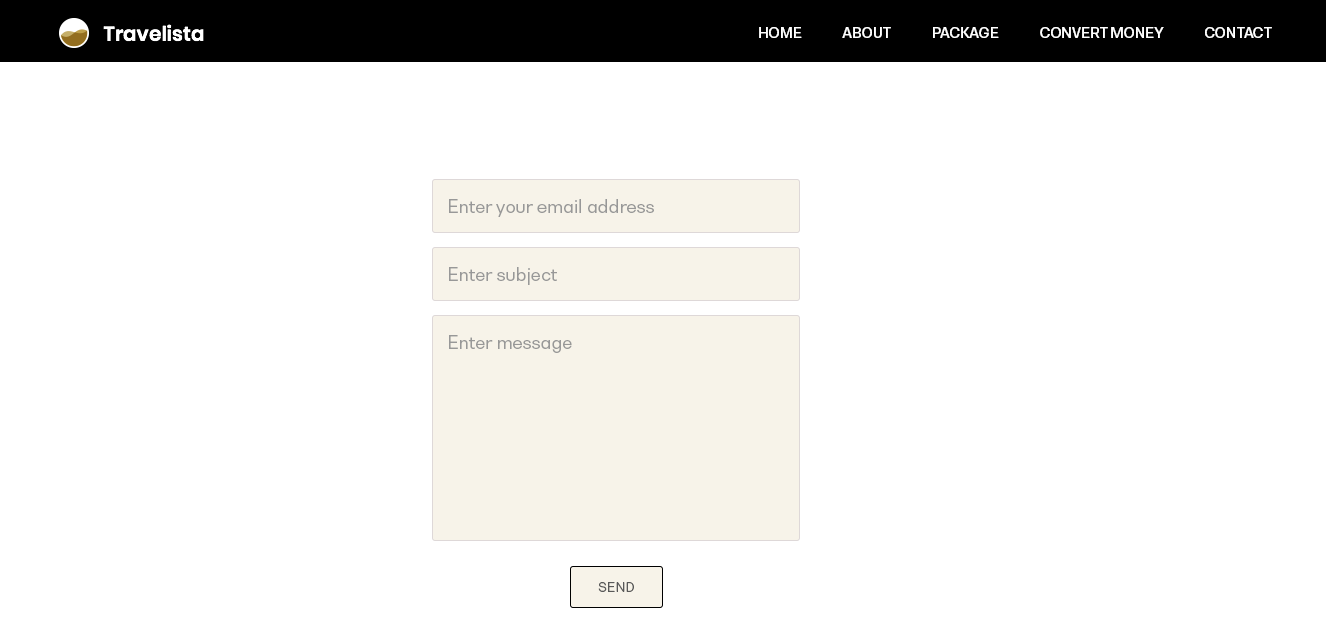
<style>
.page{position:relative;width:1326px;height:638px;background:#ffffff}
.page>*{position:absolute;margin:0}
.t1{font:13.3px "BwNistaGeometricDEMO-Bold";color:#ffffff}
.t2{font:17.1px "BwNistaGeometricDEMO-Regular";color:#989898}
.t3{font:12.9px "BwNistaGeometricDEMO-Regular";color:#595959}
</style>
<div class="page">
<p class="t1" style="left:759px;top:27px;width:513px;height:11px">HOME             ABOUT             PACKAGE             CONVERT MONEY             CONTACT</p>
<p class="t2" style="left:449px;top:199px;width:205px;height:18px">Enter your email address</p>
<p class="t2" style="left:449px;top:267px;width:108px;height:18px">Enter subject</p>
<p class="t2" style="left:449px;top:335px;width:123px;height:18px">Enter message</p>
<p class="t3" style="left:598px;top:582px;width:36px;height:10px">SEND</p>
</div>
